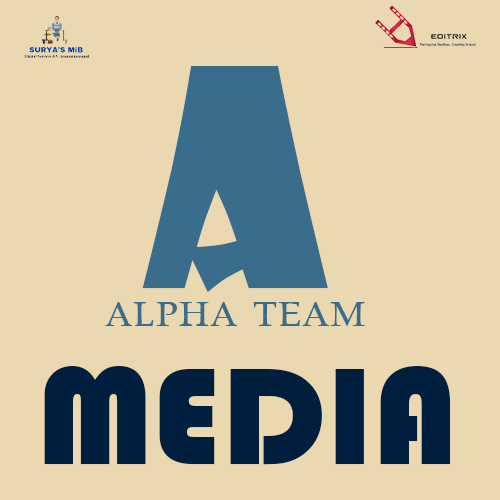
<style>
.page{position:relative;width:500px;height:500px;background:#ead8b1}
.page>*{position:absolute;margin:0}
.t1{font:296.2px "ShowcardGothic-Reg";color:#3a6d8c}
.t2{font:50px "A760RomanSmc";color:#3a6d8c}
.t3{font:142.6px "Bauhaus93";color:#001f3f;text-transform:uppercase}
</style>
<div class="page">
<p class="t1" style="left:142px;top:66px;width:186px;height:227px">A</p>
<p class="t2" style="left:105px;top:302px;width:260px;height:25px">alpha team</p>
<p class="t3" style="left:44px;top:366px;width:407px;height:99px">media</p>
</div>
